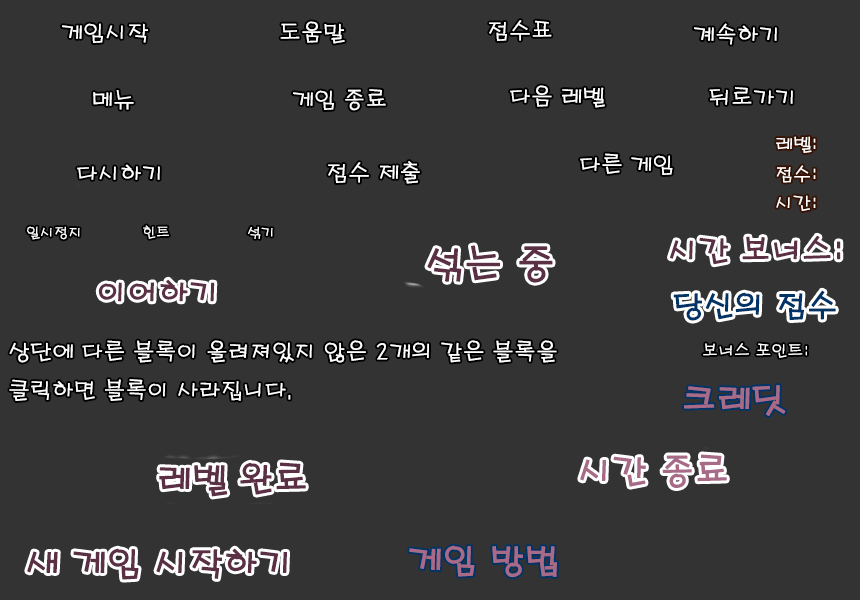
<style>
.page{position:relative;width:860px;height:600px;background:#333333}
.page>*{position:absolute;margin:0}
.t1{font:22px "H2porL";color:#ffffff}
.t2{font:18px "H2porL";color:#ffffff}
.t3{font:14px "H2porL";color:#ffffff}
.t4{font:38px "H2porL";color:#5b3044;font-weight:bold}
.t5{font:30px "H2porL";color:#5b3044;font-weight:bold}
.t6{font:30px "H2porL";color:#003366;font-weight:bold}
.t7{font:16px "H2porL";color:#ffffff}
.t8{font:34px "H2porL";color:#a76b87;font-weight:bold}
.t9{font:34px "H2porL";color:#5b3044;font-weight:bold}
</style>
<div class="page">
<p class="t1" style="left:62px;top:23px;width:86px;height:20px">게임시작</p>
<p class="t1" style="left:280px;top:21px;width:65px;height:23px">도움말</p>
<p class="t1" style="left:489px;top:20px;width:63px;height:21px">점수표</p>
<p class="t1" style="left:694px;top:23px;width:83px;height:22px">계속하기</p>
<p class="t1" style="left:293px;top:89px;width:93px;height:22px">게임 종료</p>
<p class="t1" style="left:510px;top:85px;width:95px;height:23px">다음 레벨</p>
<p class="t1" style="left:709px;top:87px;width:84px;height:19px">뒤로가기</p>
<p class="t1" style="left:93px;top:90px;width:41px;height:20px">메뉴</p>
<p class="t2" style="left:776px;top:136px;width:40px;height:17px">레벨:</p>
<p class="t1" style="left:328px;top:161px;width:92px;height:23px">점수 제출</p>
<p class="t1" style="left:580px;top:153px;width:93px;height:22px">다른 게임</p>
<p class="t1" style="left:77px;top:164px;width:83px;height:16px">다시하기</p>
<p class="t2" style="left:776px;top:165px;width:40px;height:18px">점수:</p>
<p class="t2" style="left:776px;top:195px;width:40px;height:16px">시간:</p>
<p class="t3" style="left:27px;top:226px;width:53px;height:14px">일시정지</p>
<p class="t3" style="left:143px;top:225px;width:26px;height:14px">힌트</p>
<p class="t3" style="left:248px;top:226px;width:25px;height:13px">섞기</p>
<p class="t4" style="left:427px;top:245px;width:126px;height:38px">섞는 중</p>
<p class="t5" style="left:98px;top:279px;width:117px;height:23px">이어하기</p>
<p class="t6" style="left:673px;top:290px;width:163px;height:31px">당신의 점수</p>
<p class="t1" style="left:9px;top:340px;width:548px;height:61px">상단에 다른 블록이 올려져있지 않은 2개의 같은 블록을<br>클릭하면 블록이 사라집니다.</p>
<p class="t7" style="left:703px;top:343px;width:104px;height:15px">보너스 포인트:</p>
<p class="t8" style="left:684px;top:385px;width:102px;height:31px">크레딧</p>
<p class="t9" style="left:159px;top:462px;width:147px;height:35px">레벨 완료</p>
<p class="t8" style="left:409px;top:545px;width:148px;height:33px">게임 방법</p>
<p class="t9" style="left:27px;top:548px;width:260px;height:32px">새 게임 시작하기</p>
</div>
